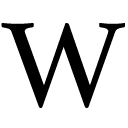
<style>
.page{position:relative;width:128px;height:128px;background:#ffffff}
.page>*{position:absolute;margin:0}
.t1{font:126.4px "Athelas-Regular";color:#000000}
</style>
<div class="page">
<p class="t1" style="left:1px;top:23px;width:124px;height:85px">W</p>
</div>
